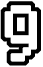
<style>
.page{position:relative;width:43px;height:67px;background:#ffffff}
.page>*{position:absolute;margin:0}
.t1{font:72px "Cubic_11";letter-spacing:0.1em;color:#ffffff;font-weight:bold}
</style>
<div class="page">
<p class="t1" style="left:4px;top:5px;width:33px;height:57px">9</p>
</div>
